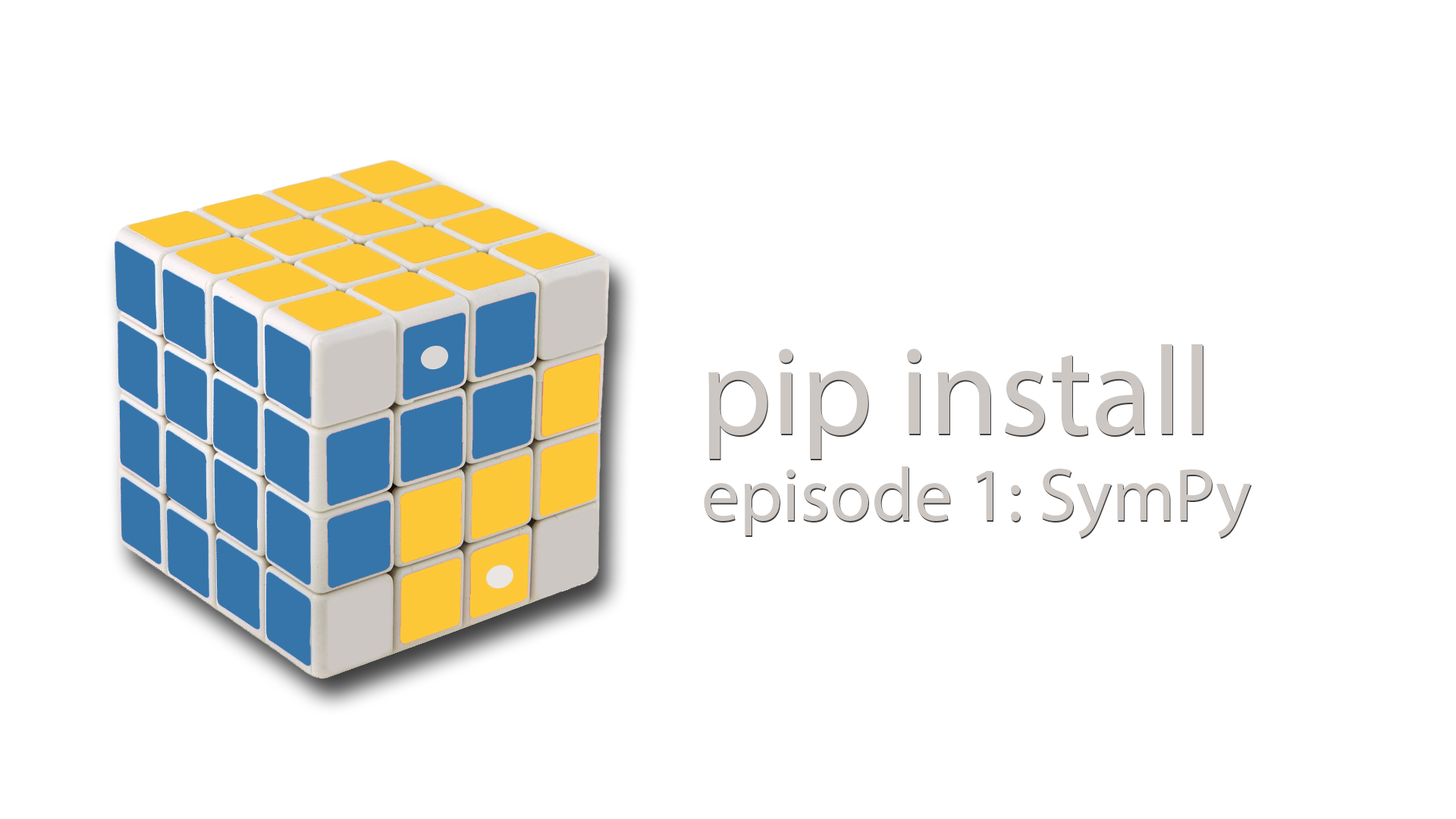
<style>
.page{position:relative;width:1456px;height:819px;background:#ffffff}
.page>*{position:absolute;margin:0}
.t1{font:126.4px "MyriadPro-Regular";color:#ccc7c3}
.t2{font:75.8px "MyriadPro-Regular";color:#ccc7c3}
</style>
<div class="page">
<p class="t1" style="left:708px;top:344px;width:495px;height:115px">pip install</p>
<p class="t2" style="left:704px;top:466px;width:547px;height:72px">episode 1: SymPy</p>
</div>
